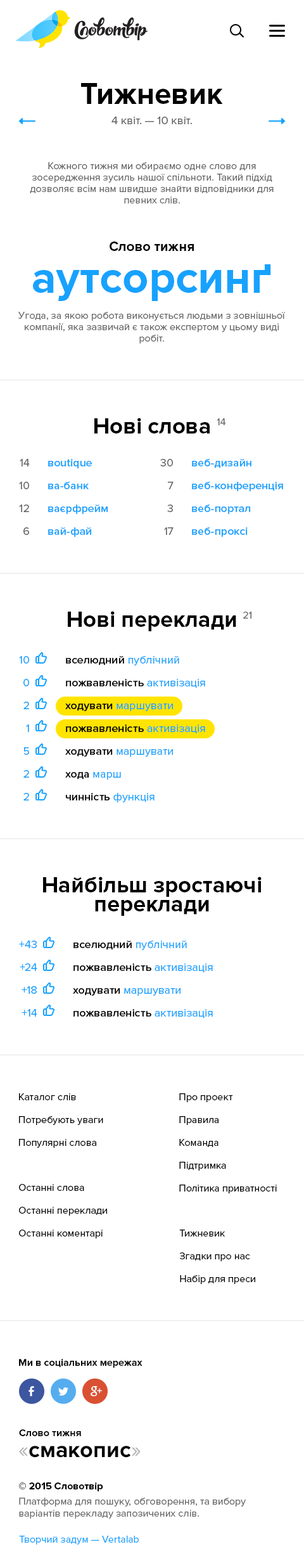
<style>
.page{position:relative;width:304px;height:1568px;background:#ffffff}
.page>*{position:absolute;margin:0}
.t1{font:30.4px "ProximaNova-Bold";color:#000000}
.t2{font:11.4px "ProximaNova-Regular";color:#666666}
.t3{font:10.1px/11.4px "ProximaNova-Regular";color:#666666}
.t4{font:13.9px "ProximaNova-Bold";color:#000000}
.t5{font:45.6px "ProximaNova-Bold";color:#17a2ff}
.t6{font:22.8px "ProximaNova-Bold";color:#000000}
.t7{font:10.1px "ProximaNova-Regular";color:#666666}
.t8{font:11.4px/22.8px "ProximaNova-Regular";color:#666666}
.t9{font:11.4px/22.8px "ProximaNova-Semibold";color:#17a2ff}
.t10{font:11.4px/22.8px "ProximaNova-Regular";color:#17a2ff}
.t11{font:11.4px/22.8px "ProximaNova-Semibold";color:#000000}
.t12{font:22.8px/19px "ProximaNova-Bold";color:#000000}
.t13{font:10.1px/22.8px "ProximaNova-Regular";color:#000000}
.t14{font:10.1px/22.8px "ProximaNova-Regular";color:#010101}
.t15{font:10.1px "ProximaNova-Bold";color:#010101}
.t16{font:22.8px "ProximaNova-Regular";color:#b3b3b3}
.t17{font:10.1px/13.9px "ProximaNova-Bold";color:#000000}
.t18{font:10.1px/15.2px "ProximaNova-Regular";color:#666666}
.t19{font:10.1px "ProximaNova-Regular";color:#17a2ff}
</style>
<div class="page">
<p class="t1" style="left:81px;top:83px;width:142px;height:21px">Тижневик</p>
<p class="t2" style="left:112px;top:117px;width:80px;height:7px">4 квіт. — 10 квіт.</p>
<p class="t3" style="left:30px;top:162px;width:244px;height:41px;text-align:center">Кожного тижня ми обираємо одне слово для зосередження зусиль нашої спільноти. Такий підхід дозволяє всім нам швидше знайти відповідники для певних слів.</p>
<p class="t4" style="left:110px;top:241px;width:84px;height:10px">Слово тижня</p>
<p class="t5" style="left:33px;top:264px;width:238px;height:37px">аутсорсинґ</p>
<p class="t3" style="left:18px;top:312px;width:267px;height:32px;text-align:center">Угода, за якою робота виконується людьми з зовнішньої компанії, яка зазвичай є також експертом у цьому виді робіт.</p>
<p class="t6" style="left:94px;top:418px;width:116px;height:16px">Нові слова</p>
<p class="t7" style="left:217px;top:418px;width:9px;height:7px">14</p>
<p class="t8" style="left:19px;top:459px;width:11px;height:76px;text-align:right">14<br>10<br>12<br>6</p>
<p class="t9" style="left:48px;top:459px;width:60px;height:78px">вoutique<br>ва-банк<br>ваєрфрейм<br>вай-фай</p>
<p class="t8" style="left:160px;top:459px;width:14px;height:76px;text-align:right">30<br>7<br>3<br>17</p>
<p class="t9" style="left:192px;top:459px;width:91px;height:78px">веб-дизайн<br>веб-конференція<br>веб-портал<br>веб-проксі</p>
<p class="t6" style="left:68px;top:611px;width:168px;height:20px">Нові переклади</p>
<p class="t7" style="left:243px;top:612px;width:9px;height:7px">21</p>
<p class="t10" style="left:19px;top:656px;width:10px;height:144px;text-align:right">10<br>0<br>2<br>1<br>5<br>2<br>2</p>
<p class="t11" style="left:65px;top:655px;width:140px;height:147px">вселюдний <span class="t10">публічний<br></span>пожвавленість <span class="t10">активізація<br></span>ходувати <span class="t10">маршувати<br></span>пожвавленість <span class="t10">активізація<br></span>ходувати <span class="t10">маршувати<br></span>хода <span class="t10">марш<br></span>чинність <span class="t10">функція</span></p>
<p class="t12" style="left:43px;top:877px;width:219px;height:39px;text-align:center">Найбільш зростаючі<br>переклади</p>
<p class="t10" style="left:19px;top:941px;width:18px;height:76px;text-align:right">+43<br>+24<br>+18<br>+14</p>
<p class="t11" style="left:73px;top:940px;width:140px;height:79px">вселюдний <span class="t10">публічний<br></span>пожвавленість <span class="t10">активізація<br></span>ходувати <span class="t10">маршувати<br></span>пожвавленість <span class="t10">активізація</span></p>
<p class="t13" style="left:19px;top:1093px;width:84px;height:55px">Каталог слів<br>Потребують уваги<br>Популярні слова</p>
<p class="t13" style="left:179px;top:1093px;width:98px;height:100px">Про проект<br>Правила<br>Команда<br>Підтримка<br>Політика приватності</p>
<p class="t13" style="left:19px;top:1184px;width:88px;height:54px">Останні слова<br>Останні переклади<br>Останні коментарі</p>
<p class="t14" style="left:179px;top:1230px;width:76px;height:54px">Тижневик<br>Згадки про нас<br>Набір для преси</p>
<p class="t15" style="left:19px;top:1359px;width:124px;height:9px">Ми в соціальних мережах</p>
<p class="t15" style="left:19px;top:1429px;width:62px;height:7px">Слово тижня</p>
<p class="t6" style="left:19px;top:1446px;width:122px;height:12px"><span class="t16">«</span>смакопис<span class="t16">»</span></p>
<p class="t7" style="left:19px;top:1482px;width:227px;height:37px"><span class="t17">© 2015 Словотвір<br></span><span class="t18">Платформа для пошуку, обговорення, </span>та вибору<br>варіантів перекладу запозичених слів.</p>
<p class="t19" style="left:19px;top:1536px;width:120px;height:9px">Творчий задум — Vertalab</p>
</div>
